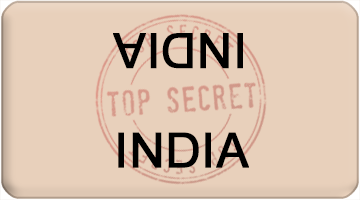
<style>
.page{position:relative;width:360px;height:200px;background:#e8d0bb}
.page>*{position:absolute;margin:0}
.t1{font:48px "ArialMT";color:#000000;font-weight:bold}
</style>
<div class="page">
<p class="t1" style="left:113px;top:33px;width:130px;height:36px;rotate:180deg">INDIA</p>
<p class="t1" style="left:118px;top:132px;width:131px;height:36px">INDIA</p>
</div>
